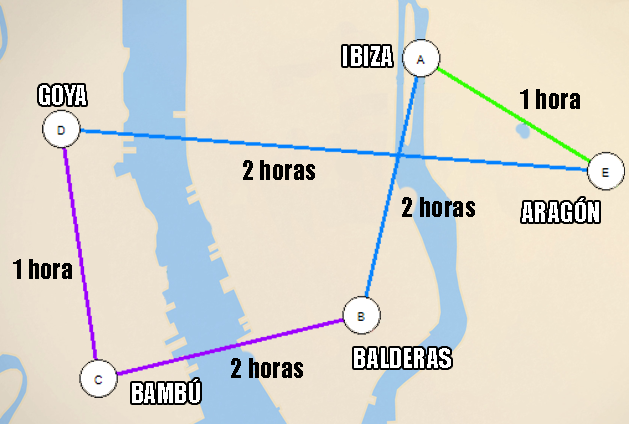
<style>
.page{position:relative;width:629px;height:424px}
.page>*{position:absolute;margin:0}
.t1{font:24.8px "Impact";color:#ffffff}
.t2{font:24.8px "Impact";color:#000000}
</style>
<div class="page">
<p class="t1" style="left:343px;top:46px;width:49px;height:20px">IBIZA</p>
<p class="t1" style="left:39px;top:85px;width:47px;height:20px">GOYA</p>
<p class="t2" style="left:520px;top:89px;width:60px;height:20px">1 hora</p>
<p class="t2" style="left:243px;top:160px;width:72px;height:20px">2 horas</p>
<p class="t2" style="left:402px;top:197px;width:73px;height:20px">2 horas</p>
<p class="t1" style="left:522px;top:198px;width:77px;height:24px">ARAGÓN</p>
<p class="t2" style="left:13px;top:259px;width:59px;height:20px">1 hora</p>
<p class="t1" style="left:354px;top:348px;width:97px;height:20px">BALDERAS</p>
<p class="t2" style="left:231px;top:358px;width:72px;height:20px">2 horas</p>
<p class="t1" style="left:132px;top:379px;width:68px;height:24px">BAMBÚ</p>
</div>
